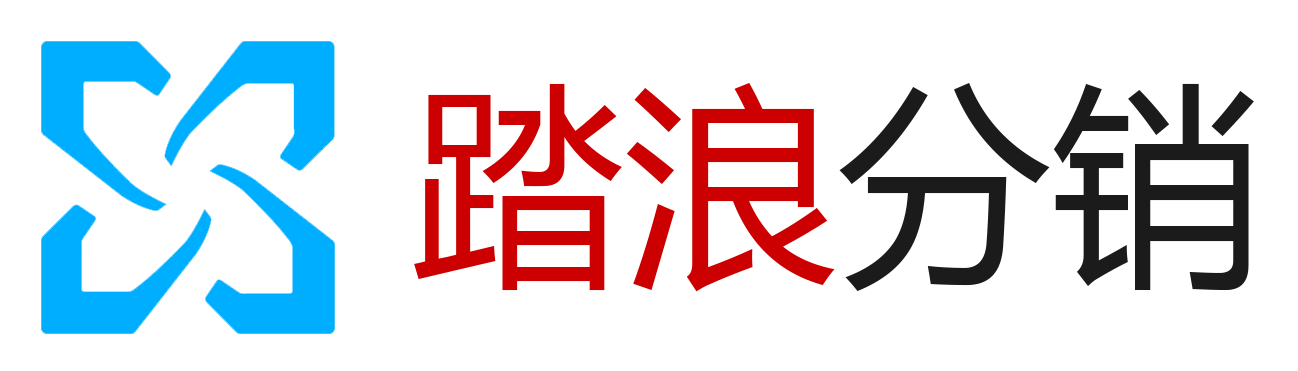
<style>
.page{position:relative;width:1298px;height:371px;background:#ffffff}
.page>*{position:absolute;margin:0}
.t1{font:214.5px "MicrosoftYaHei";color:#cc0000}
.t2{font:214.5px "MicrosoftYaHei";color:#1b1b1b}
</style>
<div class="page">
<p class="t1" style="left:414px;top:82px;width:840px;height:210px">踏浪<span class="t2">分销</span></p>
</div>
